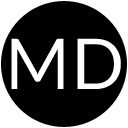
<style>
.page{position:relative;width:128px;height:128px;background:#000000}
.page>*{position:absolute;margin:0}
.t1{font:70px "Lato-Regular";letter-spacing:0.025em;color:#ffffff}
</style>
<div class="page">
<p class="t1" style="left:11px;top:38px;width:110px;height:51px">MD</p>
</div>
